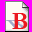
<style>
.page{position:relative;width:32px;height:32px;background:#ff00ff}
.page>*{position:absolute;margin:0}
.t1{font:24.6px "Garamond-Bold";color:#eb181e}
.t2{font:18.3px "Garamond-Bold";scale:1.15 1}
</style>
<div class="page">
<p class="t1" style="left:12px;top:13px;width:16px;height:16px">B</p>
<p class="t2" style="left:5px;top:20px;width:20px;height:9px">B</p>
</div>
